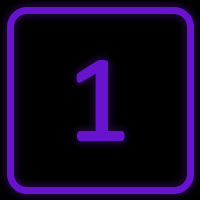
<style>
.page{position:relative;width:200px;height:200px;background:#000000}
.page>*{position:absolute;margin:0}
.t1{font:125.4px "Calibri";color:#6814ce;font-weight:bold}
</style>
<div class="page">
<p class="t1" style="left:76px;top:60px;width:49px;height:81px">1</p>
</div>
